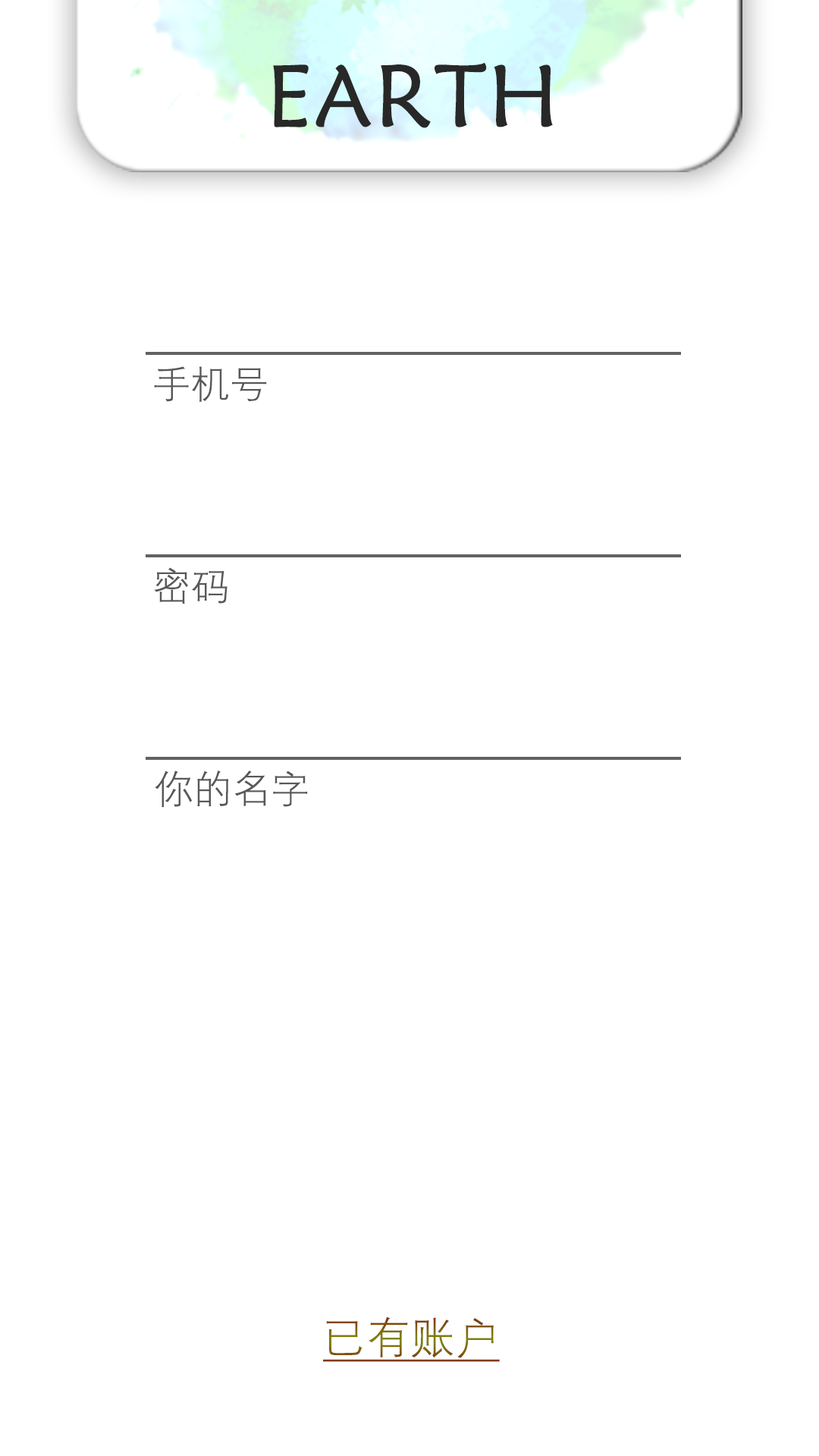
<style>
.page{position:relative;width:819px;height:1456px;background:#ffffff}
.page>*{position:absolute;margin:0}
.t1{font:88px "STXinwei";color:#282828;font-weight:bold}
.t2{font:37.9px "DengXian-Light";color:#585858;font-weight:bold}
.t3{font:42.9px "DengXian-Light";font-weight:bold;text-decoration:underline}
</style>
<div class="page">
<p class="t1" style="left:273px;top:62px;width:280px;height:66px">EARTH</p>
<p class="t2" style="left:154px;top:366px;width:113px;height:36px">手机号</p>
<p class="t2" style="left:154px;top:567px;width:73px;height:37px">密码</p>
<p class="t2" style="left:155px;top:770px;width:153px;height:38px">你的名字</p>
<p class="t3" style="left:323px;top:1316px;width:177px;height:46px">已有账户</p>
</div>
